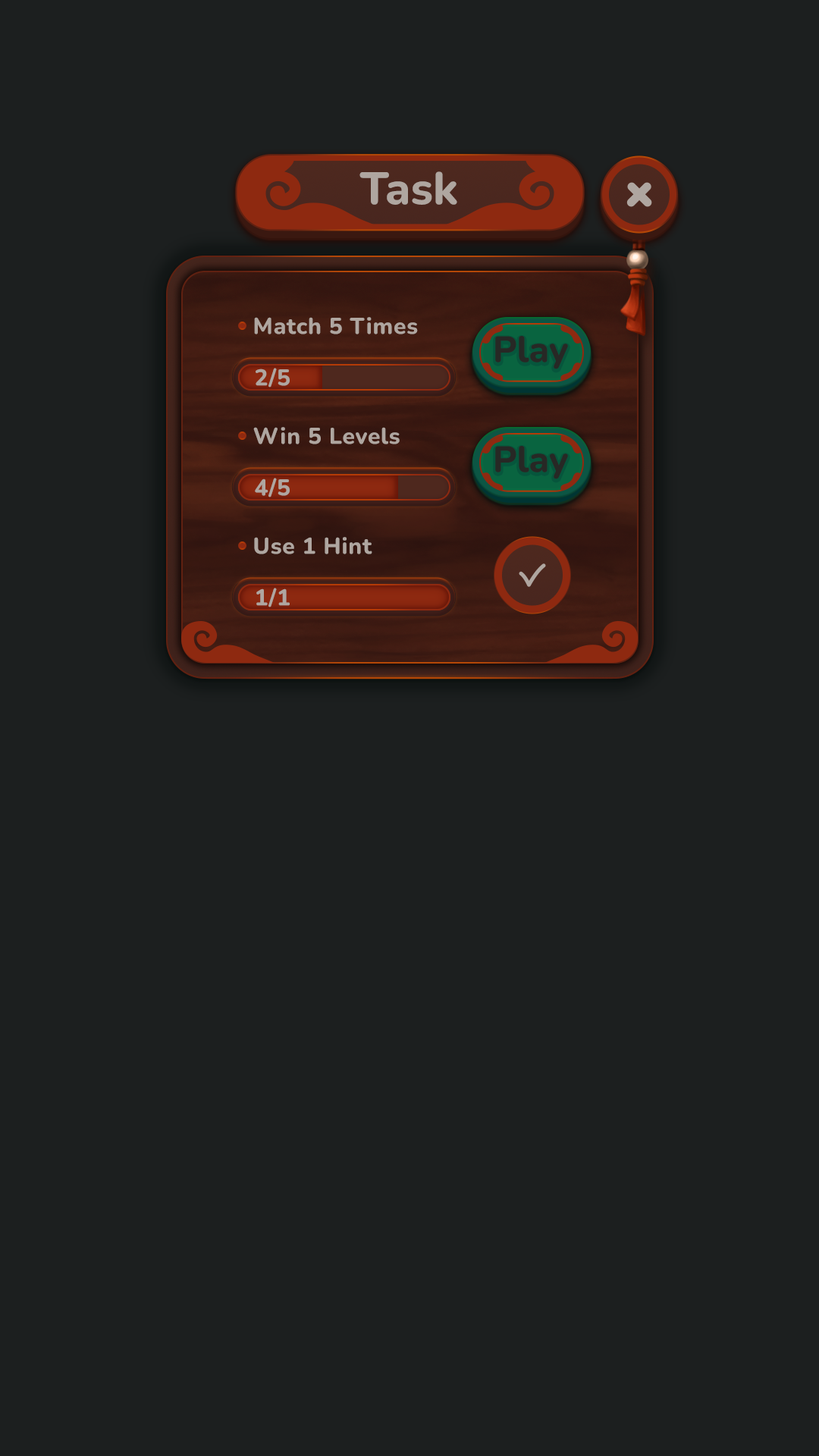
<style>
.page{position:relative;width:819px;height:1456px;background:#1c1f1f}
.page>*{position:absolute;margin:0}
.t1{font:45.5px "Nunito-ExtraBold";color:#afa6a0}
.t2{font:22.7px "Nunito-ExtraBold";letter-spacing:0.025em;color:#afa6a0}
.t3{font:36.4px "Nunito-ExtraBold";color:#272825}
</style>
<div class="page">
<p class="t1" style="left:359px;top:171px;width:98px;height:34px">Task</p>
<p class="t2" style="left:254px;top:317px;width:164px;height:17px">Match 5 Times</p>
<p class="t3" style="left:495px;top:336px;width:73px;height:33px">Play</p>
<p class="t2" style="left:256px;top:368px;width:34px;height:20px">2/5</p>
<p class="t2" style="left:253px;top:427px;width:147px;height:17px">Win 5 Levels</p>
<p class="t3" style="left:495px;top:446px;width:73px;height:33px">Play</p>
<p class="t2" style="left:255px;top:478px;width:35px;height:19px">4/5</p>
<p class="t2" style="left:254px;top:537px;width:118px;height:17px">Use 1 Hint</p>
<p class="t2" style="left:256px;top:588px;width:34px;height:19px">1/1</p>
</div>
